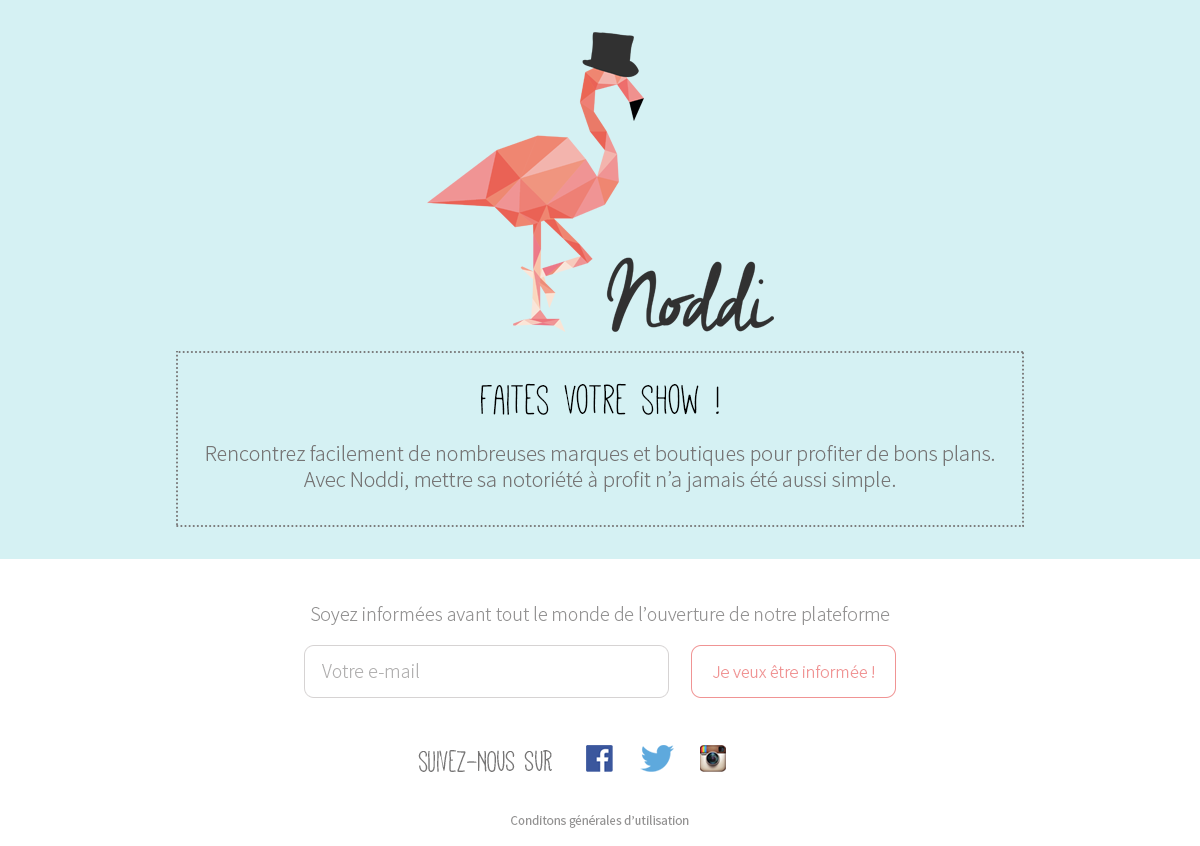
<style>
.page{position:relative;width:1200px;height:846px;background:#d5f1f3}
.page>*{position:absolute;margin:0}
.t1{font:47px "Mathlete-Skinny";color:#000000}
.t2{font:22px "SourceSansPro-Light";color:#777676}
.t3{font:20px "SourceSansPro-Light";color:#949393}
.t4{font:20px "SourceSansPro-Light";color:#b1b0b0}
.t5{font:18px "SourceSansPro-Light";color:#f09494}
.t6{font:33px "Mathlete-Skinny";color:#767575}
.t7{font:13px "SourceSansPro-Regular";color:#949393}
</style>
<div class="page">
<p class="t1" style="left:481px;top:383px;width:238px;height:32px">Faites votre show !</p>
<p class="t2" style="left:206px;top:445px;width:788px;height:47px;text-align:center">Rencontrez facilement de nombreuses marques et boutiques pour profiter de bons plans.<br>Avec Noddi, mettre sa notoriété à profit n’a jamais été aussi simple.</p>
<p class="t3" style="left:311px;top:606px;width:579px;height:19px">Soyez informées avant tout le monde de l’ouverture de notre plateforme</p>
<p class="t4" style="left:322px;top:663px;width:97px;height:15px">Votre e-mail</p>
<p class="t5" style="left:713px;top:665px;width:161px;height:13px">Je veux être informée !</p>
<p class="t6" style="left:418px;top:750px;width:134px;height:22px">suivez-NOUS SUR</p>
<p class="t7" style="left:511px;top:815px;width:178px;height:13px">Conditons générales d’utilisation</p>
</div>
